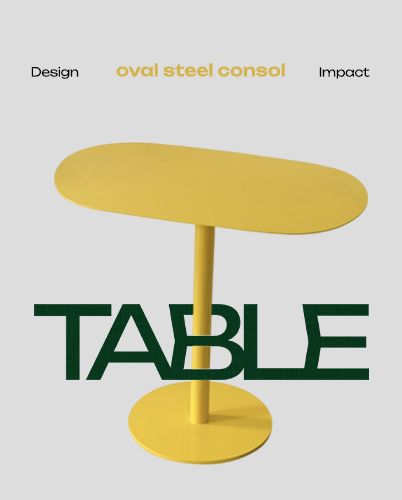
<style>
.page{position:relative;width:402px;height:500px;background:#dddddd}
.page>*{position:absolute;margin:0}
.t1{font:16.7px "Unbounded-Medium";color:#d4b44d}
.t2{font:12.5px "Unbounded-Light";letter-spacing:-0.02em;color:#000000}
</style>
<div class="page">
<p class="t1" style="left:116px;top:63px;width:169px;height:14px">oval steel consol</p>
<p class="t2" style="left:31px;top:66px;width:48px;height:13px">Design</p>
<p class="t2" style="left:319px;top:67px;width:51px;height:12px">Impact</p>
</div>
